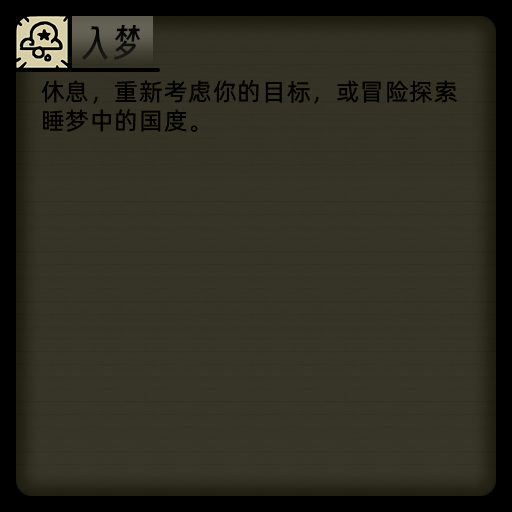
<style>
.page{position:relative;width:512px;height:512px}
.page>*{position:absolute;margin:0}
.t1{font:36px "SmileySans-Oblique";letter-spacing:0.04em;color:#000000}
.t2{font:24px "AlibabaPuHuiTiR";letter-spacing:0.04em;color:#000000}
</style>
<div class="page">
<p class="t1" style="left:82px;top:25px;width:58px;height:35px">入梦</p>
<p class="t2" style="left:41px;top:80px;width:416px;height:52px">休息，重新考虑你的目标，或冒险探索<br>睡梦中的国度。</p>
</div>
